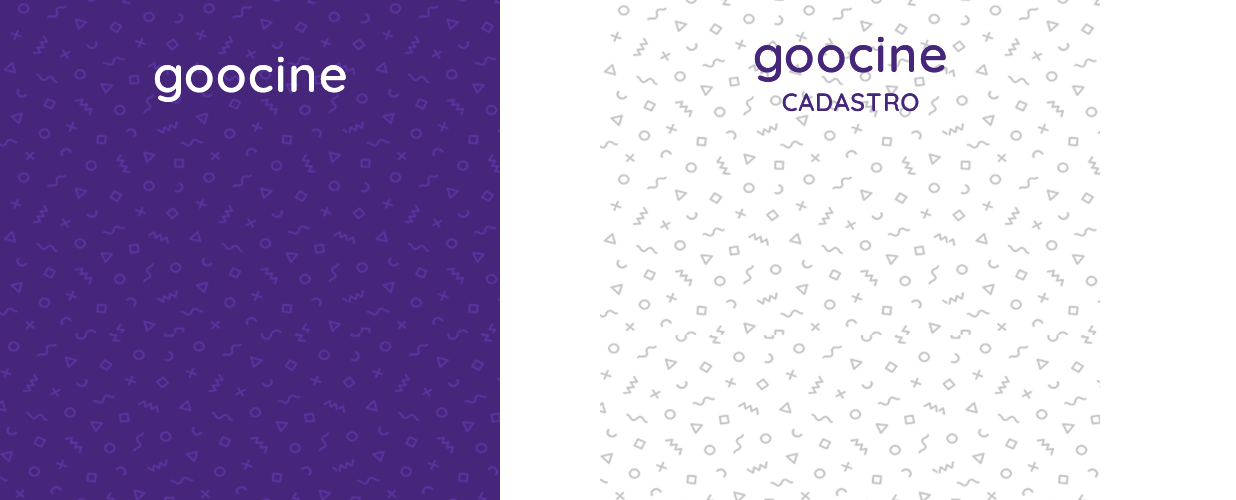
<style>
.page{position:relative;width:1236px;height:500px;background:#ffffff}
.page>*{position:absolute;margin:0}
.t1{font:50px "Quicksand-SemiBold";letter-spacing:0.03em;color:#45267b}
.t2{font:50px "Quicksand-SemiBold";letter-spacing:0.03em;color:#ffffff}
.t3{font:25px "Quicksand-SemiBold";letter-spacing:0.03em;color:#45267b}
</style>
<div class="page">
<p class="t1" style="left:754px;top:36px;width:192px;height:46px">goocine</p>
<p class="t2" style="left:154px;top:56px;width:192px;height:46px">goocine</p>
<p class="t3" style="left:782px;top:93px;width:137px;height:19px">CADASTRO</p>
</div>
